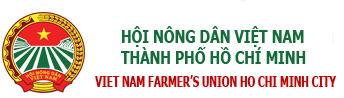
<style>
.page{position:relative;width:344px;height:98px;background:#ffffff}
.page>*{position:absolute;margin:0}
.t1{font:18px "Tahoma-Bold";color:#136d38;scale:0.77 1}
.t2{font:15px "Tahoma-Bold";color:#c60000;scale:0.66 1}
</style>
<div class="page">
<p class="t1" style="left:121px;top:26px;width:185px;height:38px">HỘI NÔNG DÂN VIỆT NAM<br>THÀNH PHỐ HỒ CHÍ MINH</p>
<p class="t2" style="left:95px;top:75px;width:241px;height:12px">VIET NAM FARMER’S UNION HO CHI MINH CITY</p>
</div>
